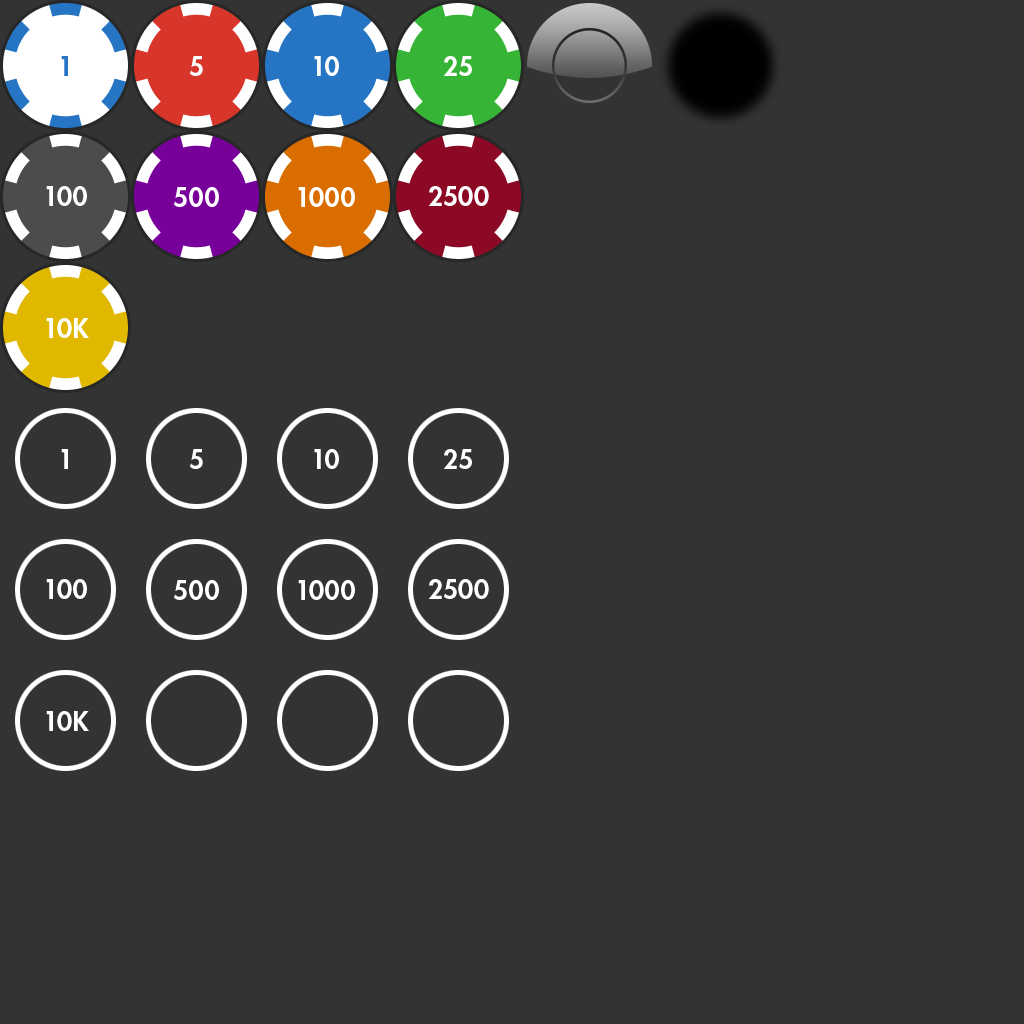
<style>
.page{position:relative;width:1024px;height:1024px;background:#333333}
.page>*{position:absolute;margin:0}
.t1{font:26px "FuturaStd-Heavy";letter-spacing:0.025em;color:#2675c4}
.t2{font:26px "FuturaStd-Heavy";letter-spacing:0.025em;color:#ffffff}
</style>
<div class="page">
<p class="t1" style="left:61px;top:56px;width:7px;height:20px">1</p>
<p class="t2" style="left:190px;top:56px;width:13px;height:20px">5</p>
<p class="t2" style="left:314px;top:56px;width:25px;height:20px">10</p>
<p class="t2" style="left:443px;top:56px;width:29px;height:20px">25</p>
<p class="t2" style="left:46px;top:186px;width:41px;height:20px">100</p>
<p class="t2" style="left:174px;top:187px;width:45px;height:20px">500</p>
<p class="t2" style="left:298px;top:187px;width:57px;height:20px">1000</p>
<p class="t2" style="left:428px;top:186px;width:61px;height:20px">2500</p>
<p class="t2" style="left:46px;top:318px;width:43px;height:20px">10K</p>
<p class="t2" style="left:61px;top:449px;width:7px;height:20px">1</p>
<p class="t2" style="left:190px;top:449px;width:13px;height:20px">5</p>
<p class="t2" style="left:314px;top:449px;width:25px;height:20px">10</p>
<p class="t2" style="left:443px;top:449px;width:29px;height:20px">25</p>
<p class="t2" style="left:46px;top:579px;width:41px;height:20px">100</p>
<p class="t2" style="left:174px;top:580px;width:45px;height:20px">500</p>
<p class="t2" style="left:298px;top:580px;width:57px;height:20px">1000</p>
<p class="t2" style="left:428px;top:579px;width:61px;height:20px">2500</p>
<p class="t2" style="left:46px;top:711px;width:43px;height:20px">10K</p>
</div>
